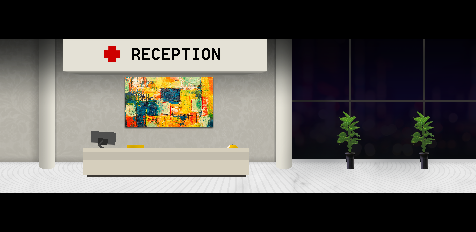
<style>
.page{position:relative;width:476px;height:232px;background:#000000}
.page>*{position:absolute;margin:0}
.t1{font:30px "8514oem";color:#000000}
</style>
<div class="page">
<p class="t1" style="left:132px;top:48px;width:88px;height:12px">RECEPTION</p>
</div>
